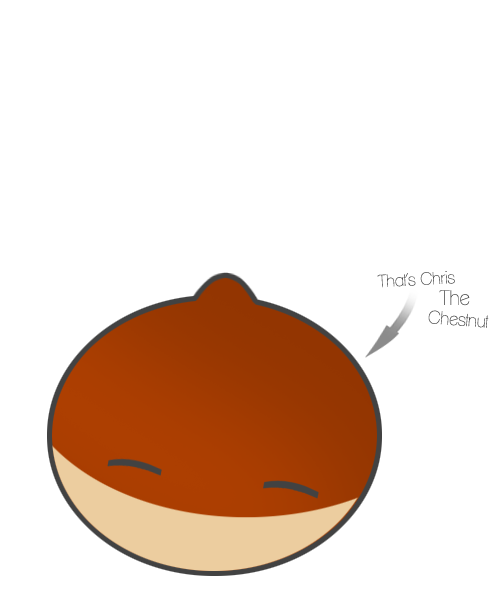
<style>
.page{position:relative;width:500px;height:600px;background:#ffffff}
.page>*{position:absolute;margin:0}
.t1{font:17px "ClementePDaa-Hairline";color:#424242}
.t2{font:20.2px "ClementePDaa-Hairline"}
.t3{font:17.7px "ClementePDaa-Hairline";color:#424242}
</style>
<div class="page">
<p class="t1" style="left:377px;top:271px;width:78px;height:17px;rotate:-3deg">That’s Chris</p>
<p class="t2" style="left:439px;top:290px;width:31px;height:16px">The</p>
<p class="t3" style="left:428px;top:310px;width:61px;height:18px;rotate:4deg">Chestnut</p>
</div>
